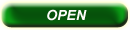
<style>
.page{position:relative;width:130px;height:30px}
.page>*{position:absolute;margin:0}
.t1{font:14px "Arial-BoldItalicMT";color:#fcfbf9}
</style>
<div class="page">
<p class="t1" style="left:47px;top:9px;width:40px;height:12px">OPEN</p>
</div>
